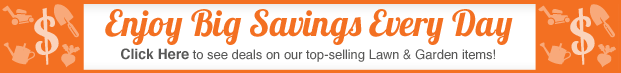
<style>
.page{position:relative;width:621px;height:73px;background:#f37022}
.page>*{position:absolute;margin:0}
.t1{font:74.2px "Lobster1.4";color:#fad3bc}
.t2{font:36px "Lobster1.4";color:#f37022}
.t3{font:13px "Helvetica";color:#585857}
.t4{font:14px "Helvetica-Bold";color:#585857}
</style>
<div class="page">
<p class="t1" style="left:34px;top:7px;width:25px;height:58px;rotate:-14deg">$</p>
<p class="t2" style="left:105px;top:9px;width:408px;height:36px">Enjoy Big Savings Every Day</p>
<p class="t1" style="left:570px;top:7px;width:25px;height:58px;rotate:-14deg">$</p>
<p class="t3" style="left:121px;top:48px;width:374px;height:14px"><span class="t4">Click Here</span> to see deals on our top-selling Lawn &amp; Garden items!</p>
</div>
